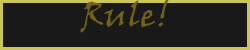
<style>
.page{position:relative;width:250px;height:50px;background:#191919}
.page>*{position:absolute;margin:0}
.t1{font:34px "VinerHandITC";color:#726218}
</style>
<div class="page">
<p class="t1" style="left:80px;top:0px;width:90px;height:33px">Rule!</p>
</div>
